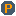
<style>
.page{position:relative;width:16px;height:16px;background:#445a6c}
.page>*{position:absolute;margin:0}
.t1{font:14px "SimplifiedArabic";letter-spacing:-0.06em;color:#ff9900;font-weight:bold}
</style>
<div class="page">
<p class="t1" style="left:5px;top:4px;width:7px;height:9px">P</p>
</div>
